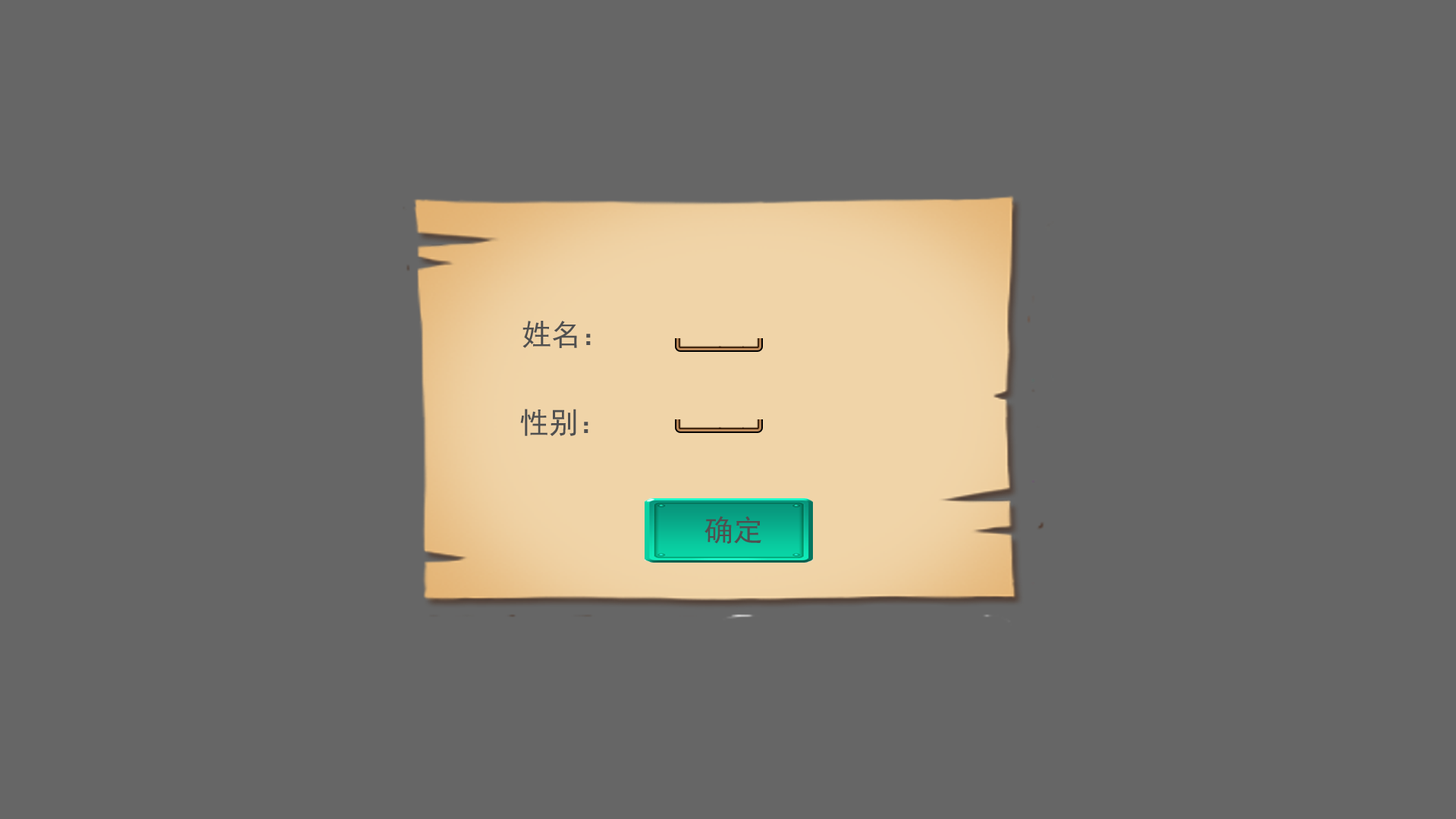
<style>
.page{position:relative;width:1456px;height:819px;background:#666666}
.page>*{position:absolute;margin:0}
.t1{font:29.6px "SimHei";color:#505050}
</style>
<div class="page">
<p class="t1" style="left:522px;top:321px;width:69px;height:27px">姓名：</p>
<p class="t1" style="left:520px;top:409px;width:68px;height:27px">性别：</p>
<p class="t1" style="left:704px;top:516px;width:57px;height:28px">确定</p>
</div>
